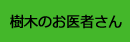
<style>
.page{position:relative;width:130px;height:42px;background:#44b72a}
.page>*{position:absolute;margin:0}
.t1{font:14.7px "Meiryo";color:#000000;font-weight:bold;scale:0.93 1}
</style>
<div class="page">
<p class="t1" style="left:10px;top:14px;width:112px;height:15px">樹木のお医者さん</p>
</div>
